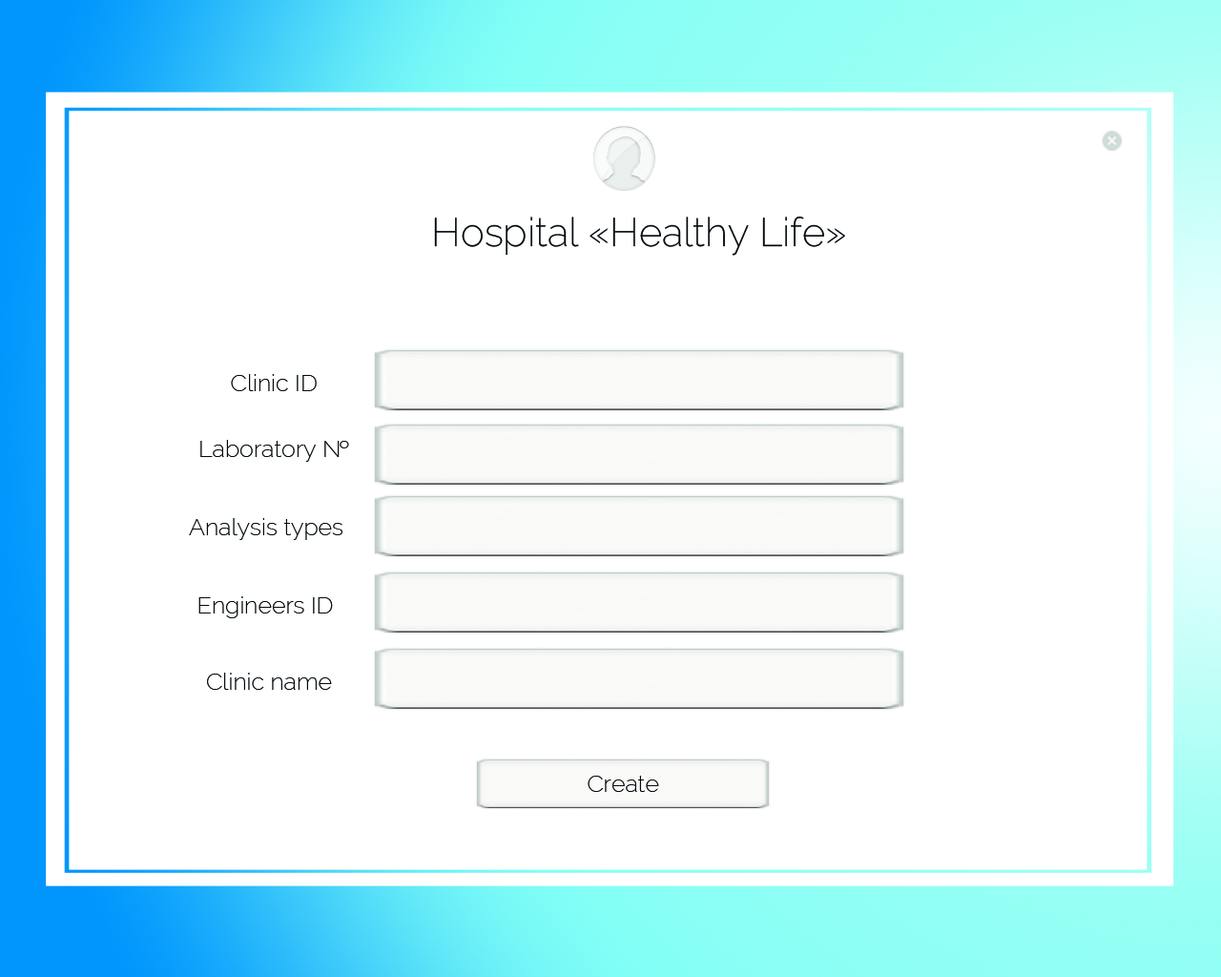
<style>
.page{position:relative;width:1221px;height:977px;background:#ffffff}
.page>*{position:absolute;margin:0}
.t1{font:39.7px "Raleway-ExtraLight";color:#050708}
.t2{font:23.8px "Raleway-ExtraLight";color:#050708}
</style>
<div class="page">
<p class="t1" style="left:434px;top:216px;width:411px;height:40px">Hospital «Healthy Life»</p>
<p class="t2" style="left:231px;top:374px;width:86px;height:17px">Clinic ID</p>
<p class="t2" style="left:200px;top:440px;width:149px;height:22px">Laboratory №</p>
<p class="t2" style="left:189px;top:518px;width:153px;height:22px">Analysis types</p>
<p class="t2" style="left:198px;top:596px;width:135px;height:22px">Engineers ID</p>
<p class="t2" style="left:207px;top:672px;width:125px;height:18px">Clinic name</p>
<p class="t2" style="left:588px;top:775px;width:71px;height:17px">Create</p>
</div>
